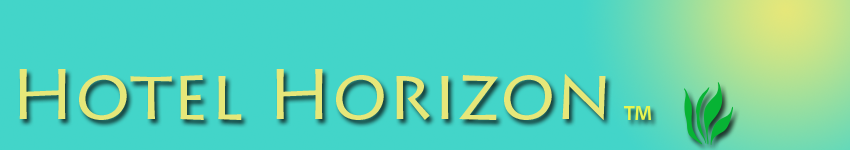
<style>
.page{position:relative;width:850px;height:150px;background:#43d5c9}
.page>*{position:absolute;margin:0}
.t1{font:72px "LithosPro-Regular";color:#e6e779}
</style>
<div class="page">
<p class="t1" style="left:19px;top:69px;width:587px;height:51px">Hotel Horizon</p>
</div>
